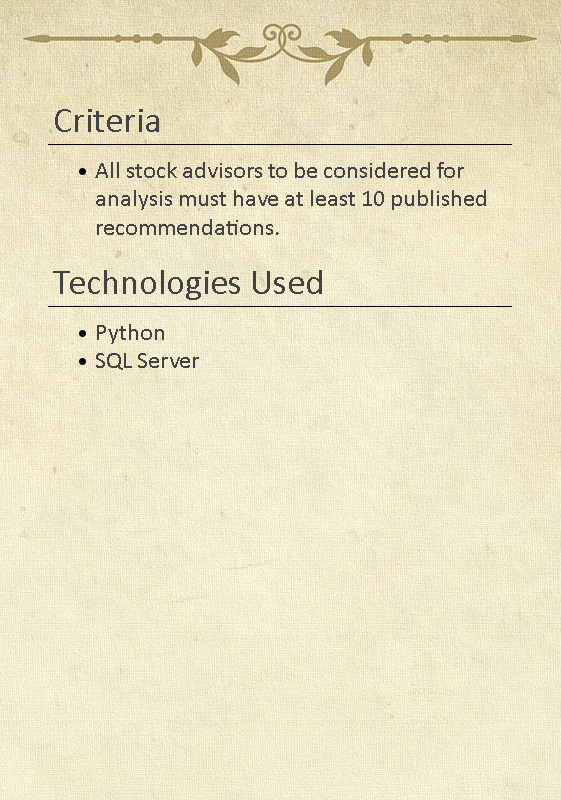
<style>
.page{position:relative;width:561px;height:800px}
.page>*{position:absolute;margin:0}
.t1{font:36px "Calibri";color:#434343}
.t2{font:24px "Calibri";color:#434343}
</style>
<div class="page">
<p class="t1" style="left:55px;top:109px;width:104px;height:23px">Criteria</p>
<p class="t2" style="left:95px;top:162px;width:391px;height:73px">All stock advisors to be considered for <br>analysis must have at least 10 published <br>recommendations.</p>
<p class="t1" style="left:53px;top:270px;width:269px;height:30px">Technologies Used</p>
<p class="t2" style="left:96px;top:324px;width:103px;height:46px">Python<br>SQL Server</p>
</div>
